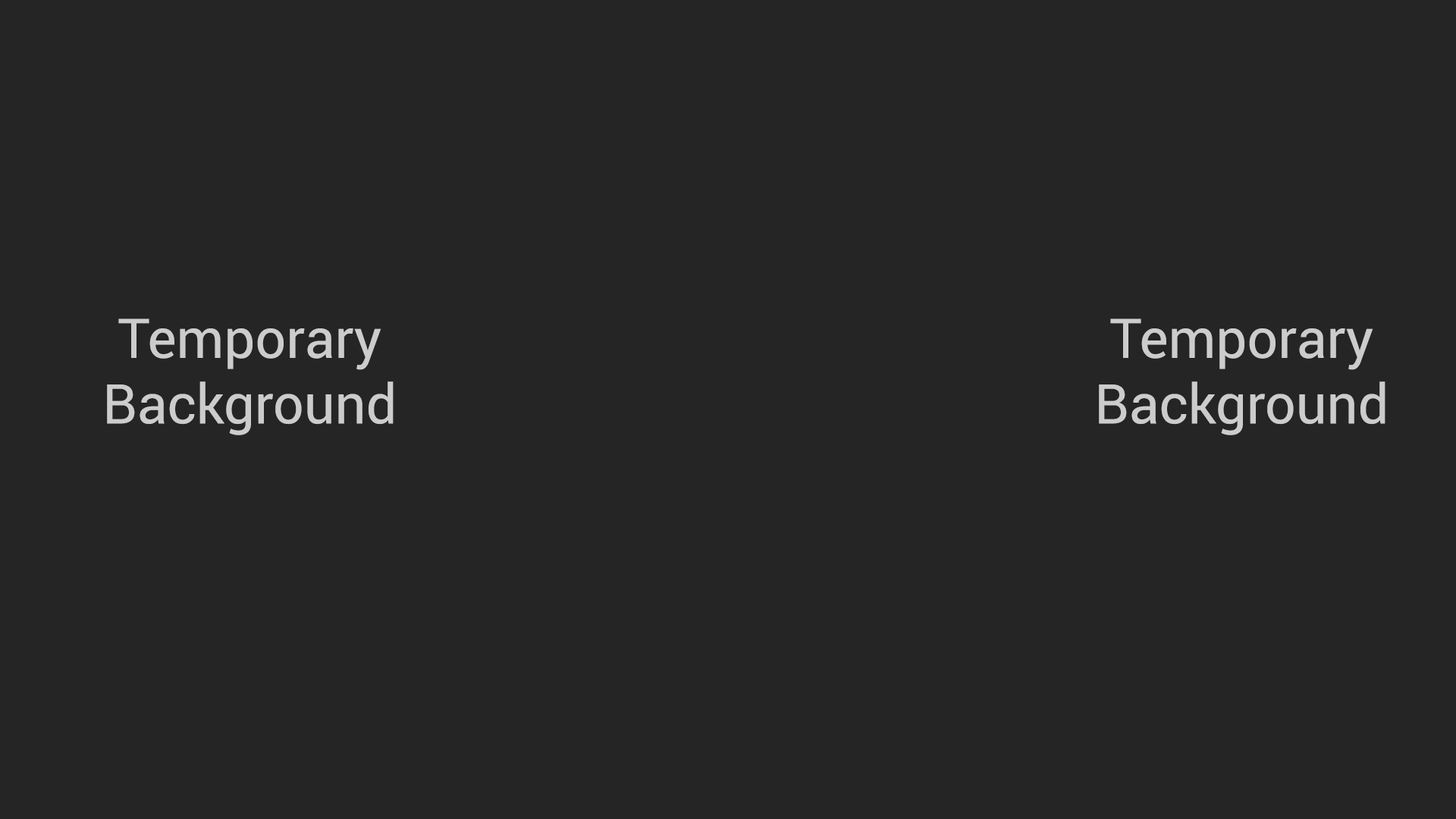
<style>
.page{position:relative;width:1456px;height:819px;background:#252525}
.page>*{position:absolute;margin:0}
.t1{font:54.6px "Roboto-Regular";color:#cccccc}
</style>
<div class="page">
<p class="t1" style="left:107px;top:318px;width:287px;height:117px;text-align:center">Temporary<br>Background</p>
<p class="t1" style="left:1099px;top:318px;width:286px;height:117px;text-align:center">Temporary<br>Background</p>
</div>
